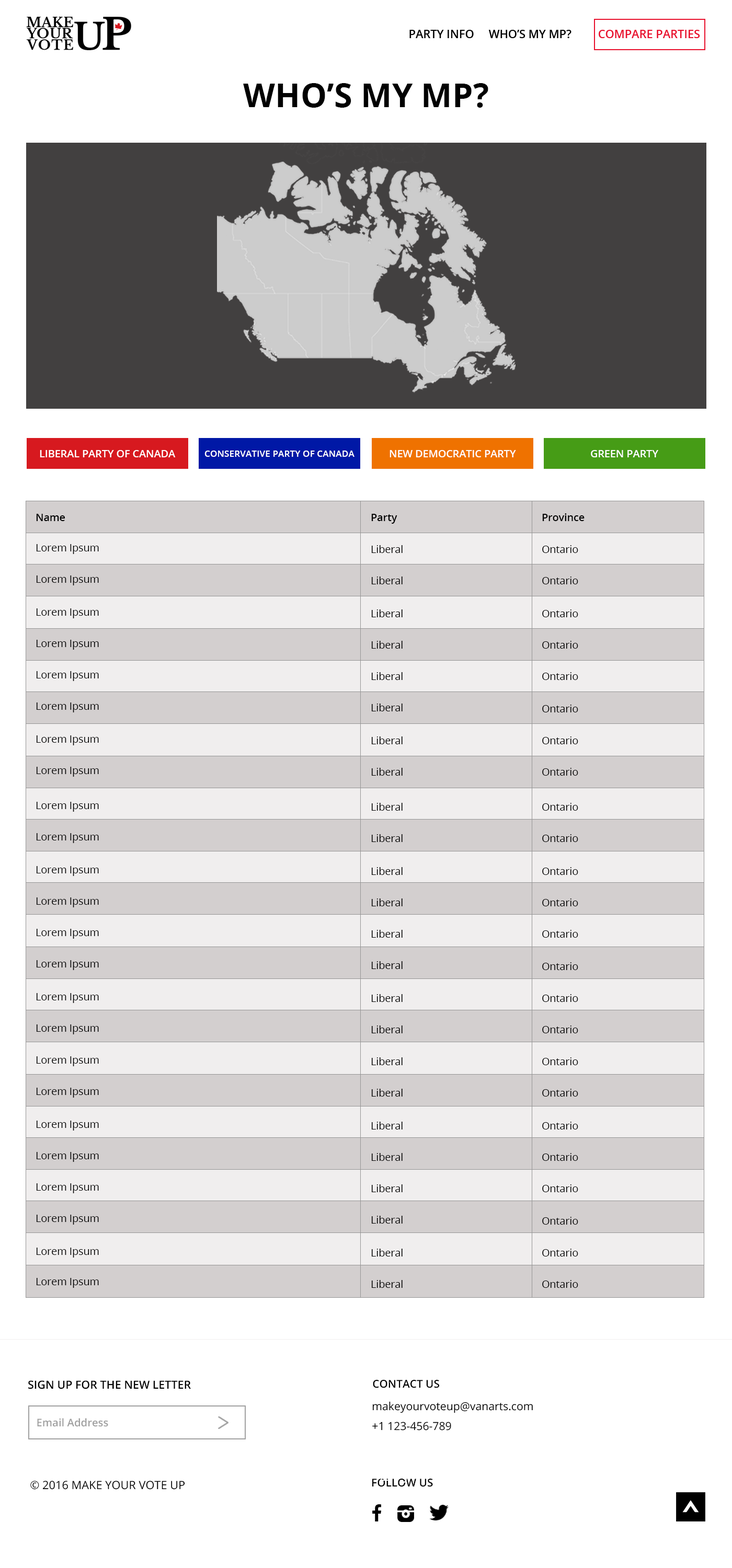
<style>
.page{position:relative;width:732px;height:1568px;background:#ffffff}
.page>*{position:absolute;margin:0}
.t1{font:11.4px "OpenSans-Semibold";color:#000000}
.t2{font:11.4px "OpenSans-Semibold";color:#e8112d}
.t3{font:33px "OpenSans-Bold";color:#010101;text-transform:uppercase}
.t4{font:10.3px "OpenSans-Semibold";color:#ffffff;text-transform:uppercase}
.t5{font:9px "OpenSans-Semibold";color:#ffffff;text-transform:uppercase}
.t6{font:10.3px "OpenSans-Semibold";color:#000000}
.t7{font:10.3px "OpenSans";color:#000000}
.t8{font:11.2px "OpenSans-Semibold";color:#000000}
.t9{font:10.9px "OpenSans-Semibold";color:#000000}
.t10{font:11.1px "OpenSans";color:#000000}
.t11{font:10.6px "OpenSans-Semibold";color:#a0a0a0}
.t12{font:11.4px "OpenSans";color:#000000}
</style>
<div class="page">
<p class="t1" style="left:409px;top:30px;width:291px;height:8px">PARTY INFO     WHO’S MY MP?         <span class="t2">COMPARE PARTIES</span></p>
<p class="t3" style="left:243px;top:83px;width:245px;height:25px">WHO’S MY MP?</p>
<p class="t4" style="left:40px;top:450px;width:136px;height:7px">Liberal Party of Canada</p>
<p class="t5" style="left:204px;top:451px;width:150px;height:6px">Conservative Party of Canada</p>
<p class="t4" style="left:389px;top:450px;width:127px;height:7px">New Democratic Party</p>
<p class="t4" style="left:591px;top:450px;width:67px;height:7px">GREEN PARTY</p>
<p class="t6" style="left:36px;top:514px;width:29px;height:7px">Name</p>
<p class="t6" style="left:371px;top:514px;width:26px;height:10px">Party</p>
<p class="t6" style="left:542px;top:513px;width:42px;height:8px">Province</p>
<p class="t7" style="left:36px;top:544px;width:63px;height:10px">Lorem Ipsum</p>
<p class="t7" style="left:371px;top:545px;width:31px;height:8px">Liberal</p>
<p class="t7" style="left:542px;top:545px;width:36px;height:8px">Ontario</p>
<p class="t7" style="left:36px;top:575px;width:63px;height:10px">Lorem Ipsum</p>
<p class="t7" style="left:371px;top:577px;width:31px;height:7px">Liberal</p>
<p class="t7" style="left:542px;top:577px;width:36px;height:7px">Ontario</p>
<p class="t7" style="left:36px;top:608px;width:63px;height:10px">Lorem Ipsum</p>
<p class="t7" style="left:371px;top:609px;width:31px;height:8px">Liberal</p>
<p class="t7" style="left:542px;top:609px;width:36px;height:8px">Ontario</p>
<p class="t7" style="left:36px;top:640px;width:63px;height:10px">Lorem Ipsum</p>
<p class="t7" style="left:371px;top:641px;width:31px;height:8px">Liberal</p>
<p class="t7" style="left:542px;top:641px;width:36px;height:8px">Ontario</p>
<p class="t7" style="left:36px;top:671px;width:63px;height:10px">Lorem Ipsum</p>
<p class="t7" style="left:371px;top:672px;width:31px;height:8px">Liberal</p>
<p class="t7" style="left:542px;top:672px;width:36px;height:8px">Ontario</p>
<p class="t7" style="left:36px;top:702px;width:63px;height:10px">Lorem Ipsum</p>
<p class="t7" style="left:371px;top:704px;width:31px;height:7px">Liberal</p>
<p class="t7" style="left:542px;top:705px;width:36px;height:7px">Ontario</p>
<p class="t7" style="left:36px;top:735px;width:63px;height:10px">Lorem Ipsum</p>
<p class="t7" style="left:371px;top:736px;width:31px;height:8px">Liberal</p>
<p class="t7" style="left:542px;top:736px;width:36px;height:8px">Ontario</p>
<p class="t7" style="left:36px;top:767px;width:63px;height:10px">Lorem Ipsum</p>
<p class="t7" style="left:371px;top:768px;width:31px;height:8px">Liberal</p>
<p class="t7" style="left:542px;top:768px;width:36px;height:8px">Ontario</p>
<p class="t7" style="left:36px;top:802px;width:63px;height:10px">Lorem Ipsum</p>
<p class="t7" style="left:371px;top:803px;width:31px;height:8px">Liberal</p>
<p class="t7" style="left:542px;top:803px;width:36px;height:8px">Ontario</p>
<p class="t7" style="left:36px;top:833px;width:63px;height:10px">Lorem Ipsum</p>
<p class="t7" style="left:371px;top:834px;width:31px;height:8px">Liberal</p>
<p class="t7" style="left:542px;top:834px;width:36px;height:8px">Ontario</p>
<p class="t7" style="left:36px;top:866px;width:63px;height:10px">Lorem Ipsum</p>
<p class="t7" style="left:371px;top:867px;width:31px;height:8px">Liberal</p>
<p class="t7" style="left:542px;top:867px;width:36px;height:8px">Ontario</p>
<p class="t7" style="left:36px;top:897px;width:63px;height:10px">Lorem Ipsum</p>
<p class="t7" style="left:371px;top:898px;width:31px;height:8px">Liberal</p>
<p class="t7" style="left:542px;top:898px;width:36px;height:8px">Ontario</p>
<p class="t7" style="left:36px;top:929px;width:63px;height:10px">Lorem Ipsum</p>
<p class="t7" style="left:371px;top:930px;width:31px;height:8px">Liberal</p>
<p class="t7" style="left:542px;top:930px;width:36px;height:8px">Ontario</p>
<p class="t7" style="left:36px;top:960px;width:63px;height:10px">Lorem Ipsum</p>
<p class="t7" style="left:371px;top:961px;width:31px;height:8px">Liberal</p>
<p class="t7" style="left:542px;top:962px;width:36px;height:8px">Ontario</p>
<p class="t7" style="left:36px;top:993px;width:63px;height:10px">Lorem Ipsum</p>
<p class="t7" style="left:371px;top:994px;width:31px;height:8px">Liberal</p>
<p class="t7" style="left:542px;top:994px;width:36px;height:8px">Ontario</p>
<p class="t7" style="left:36px;top:1024px;width:63px;height:10px">Lorem Ipsum</p>
<p class="t7" style="left:371px;top:1025px;width:31px;height:8px">Liberal</p>
<p class="t7" style="left:542px;top:1025px;width:36px;height:8px">Ontario</p>
<p class="t7" style="left:36px;top:1056px;width:63px;height:10px">Lorem Ipsum</p>
<p class="t7" style="left:371px;top:1057px;width:31px;height:8px">Liberal</p>
<p class="t7" style="left:542px;top:1057px;width:36px;height:8px">Ontario</p>
<p class="t7" style="left:36px;top:1088px;width:63px;height:10px">Lorem Ipsum</p>
<p class="t7" style="left:371px;top:1089px;width:31px;height:8px">Liberal</p>
<p class="t7" style="left:542px;top:1089px;width:36px;height:8px">Ontario</p>
<p class="t7" style="left:36px;top:1121px;width:63px;height:10px">Lorem Ipsum</p>
<p class="t7" style="left:371px;top:1122px;width:31px;height:7px">Liberal</p>
<p class="t7" style="left:542px;top:1122px;width:36px;height:7px">Ontario</p>
<p class="t7" style="left:36px;top:1152px;width:63px;height:10px">Lorem Ipsum</p>
<p class="t7" style="left:371px;top:1153px;width:31px;height:8px">Liberal</p>
<p class="t7" style="left:542px;top:1153px;width:36px;height:8px">Ontario</p>
<p class="t7" style="left:36px;top:1183px;width:63px;height:10px">Lorem Ipsum</p>
<p class="t7" style="left:371px;top:1184px;width:31px;height:8px">Liberal</p>
<p class="t7" style="left:542px;top:1184px;width:36px;height:8px">Ontario</p>
<p class="t7" style="left:36px;top:1215px;width:63px;height:10px">Lorem Ipsum</p>
<p class="t7" style="left:371px;top:1216px;width:31px;height:8px">Liberal</p>
<p class="t7" style="left:542px;top:1217px;width:36px;height:8px">Ontario</p>
<p class="t7" style="left:36px;top:1248px;width:63px;height:10px">Lorem Ipsum</p>
<p class="t7" style="left:371px;top:1249px;width:31px;height:7px">Liberal</p>
<p class="t7" style="left:542px;top:1249px;width:36px;height:7px">Ontario</p>
<p class="t7" style="left:36px;top:1278px;width:63px;height:10px">Lorem Ipsum</p>
<p class="t7" style="left:371px;top:1280px;width:31px;height:8px">Liberal</p>
<p class="t7" style="left:542px;top:1280px;width:36px;height:8px">Ontario</p>
<p class="t8" style="left:28px;top:1380px;width:163px;height:9px">SIGN UP FOR THE NEW LETTER</p>
<p class="t9" style="left:373px;top:1380px;width:66px;height:8px">CONTACT US</p>
<p class="t10" style="left:372px;top:1401px;width:161px;height:30px">makeyourvoteup@vanarts.com<br>+1 123-456-789</p>
<p class="t11" style="left:37px;top:1418px;width:71px;height:9px">Email Address</p>
<p class="t12" style="left:30px;top:1481px;width:155px;height:9px">© 2016 MAKE YOUR VOTE UP</p>
<p class="t9" style="left:372px;top:1479px;width:61px;height:8px">FOLLOW US</p>
</div>
